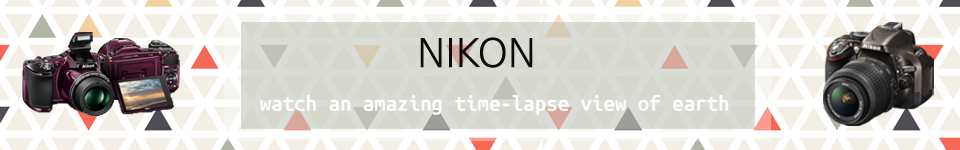
<style>
.page{position:relative;width:960px;height:150px;background:#ffffff}
.page>*{position:absolute;margin:0}
.t1{font:41.7px "Humanist777BT-LightB";color:#0f0a0a}
.t2{font:22.9px "UbuntuMono-Bold";color:#fdfbfb}
</style>
<div class="page">
<p class="t1" style="left:420px;top:37px;width:113px;height:31px">NIKON</p>
<p class="t2" style="left:260px;top:94px;width:469px;height:21px">watch an amazing time-lapse view of earth</p>
</div>
